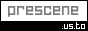
<style>
.page{position:relative;width:88px;height:31px;background:#ffffff}
.page>*{position:absolute;margin:0}
.t1{font:18px "HomespunTTBRK";color:#7b7b7b}
.t2{font:10px "HomespunTTBRK";color:#ffffff}
</style>
<div class="page">
<p class="t1" style="left:8px;top:6px;width:71px;height:11px">prescene</p>
<p class="t2" style="left:62px;top:22px;width:23px;height:7px">.us.to</p>
</div>
